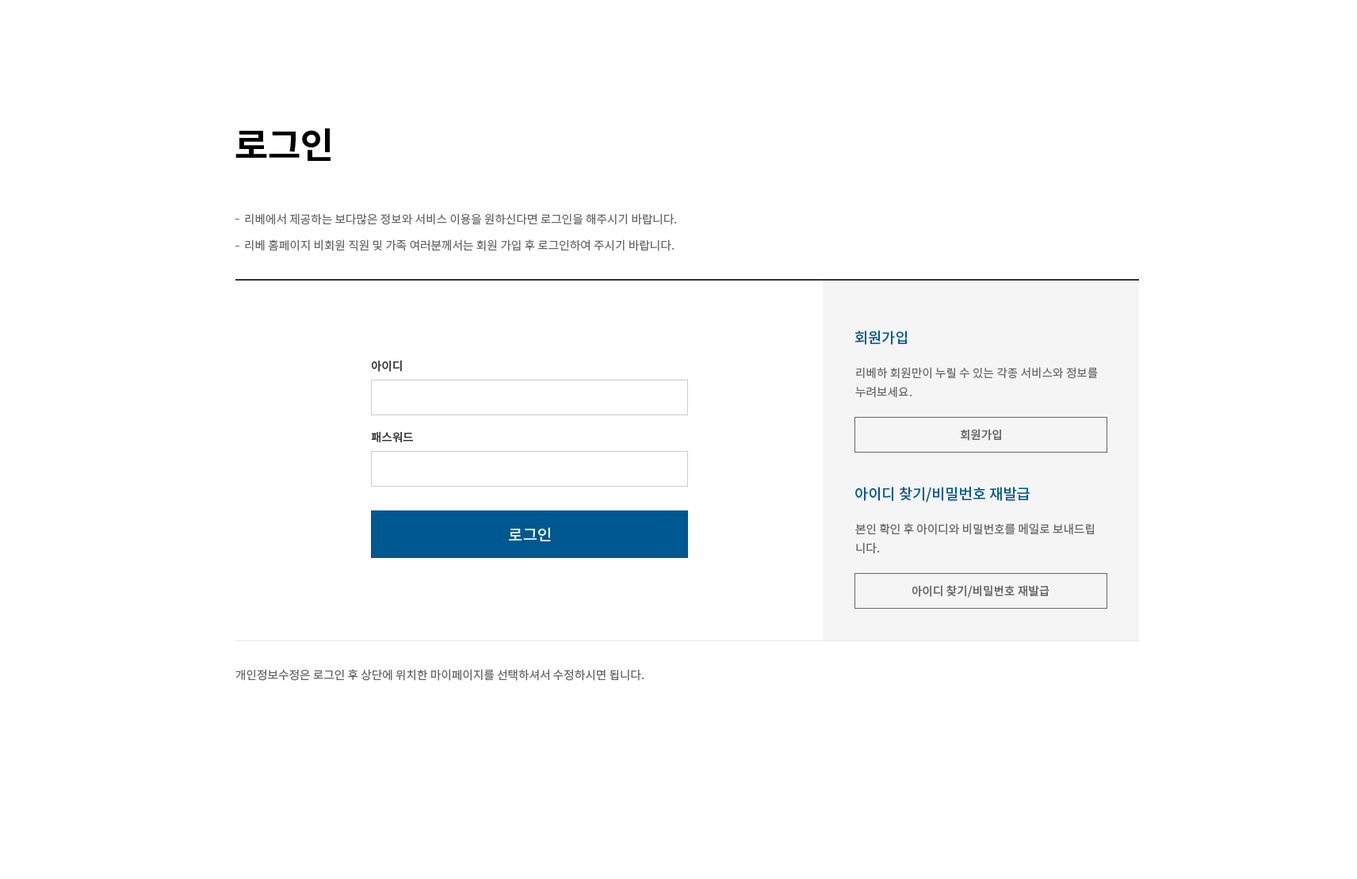
<style>
.page{position:relative;width:1357px;height:879px;background:#ffffff}
.page>*{position:absolute;margin:0}
.t1{font:35.9px "NotoSansCJKkr-Bold";color:#000000}
.t2{font:11.6px/26.4px "NotoSansCJKkr-Regular";color:#666666}
.t3{font:14.8px "NotoSansCJKkr-Medium";color:#005891}
.t4{font:11.6px "NotoSansCJKkr-Medium";color:#333333}
.t5{font:11.6px/19px "NotoSansCJKkr-Regular";color:#666666}
.t6{font:11.6px "NotoSansCJKkr-Medium";color:#666666}
.t7{font:15.9px "NotoSansCJKkr-Medium";color:#ffffff}
.t8{font:11.6px "NotoSansCJKkr-Regular";color:#666666}
</style>
<div class="page">
<p class="t1" style="left:235px;top:128px;width:95px;height:33px">로그인</p>
<p class="t2" style="left:245px;top:213px;width:432px;height:38px;text-align:justify">리베에서 제공하는 보다많은 정보와 서비스 이용을 원하신다면 로그인을 해주시기 바랍니다. <br>리베 홈페이지 비회원 직원 및 가족 여러분께서는 회원 가입 후 로그인하여 주시기 바랍니다.</p>
<p class="t3" style="left:855px;top:330px;width:52px;height:15px">회원가입</p>
<p class="t4" style="left:372px;top:360px;width:30px;height:12px">아이디</p>
<p class="t5" style="left:855px;top:367px;width:243px;height:31px;text-align:justify"><span class="t2">리베하</span> 회원만이 누릴 수 있는 각종 서비스와 정보를<br>누려보세요.</p>
<p class="t4" style="left:371px;top:431px;width:42px;height:12px">패스워드</p>
<p class="t6" style="left:961px;top:429px;width:40px;height:12px">회원가입</p>
<p class="t3" style="left:855px;top:487px;width:174px;height:15px">아이디 찾기/비밀번호 재발급</p>
<p class="t7" style="left:509px;top:527px;width:42px;height:14px">로그인</p>
<p class="t5" style="left:855px;top:523px;width:239px;height:31px;text-align:justify">본인 확인 후 아이디와 비밀번호를 메일로 보내드립<br>니다.</p>
<p class="t6" style="left:912px;top:585px;width:137px;height:13px">아이디 찾기/비밀번호 재발급</p>
<p class="t8" style="left:235px;top:669px;width:409px;height:12px">개인정보수정은 로그인 후 상단에 위치한 마이페이지를 선택하셔서 수정하시면 됩니다.</p>
</div>
